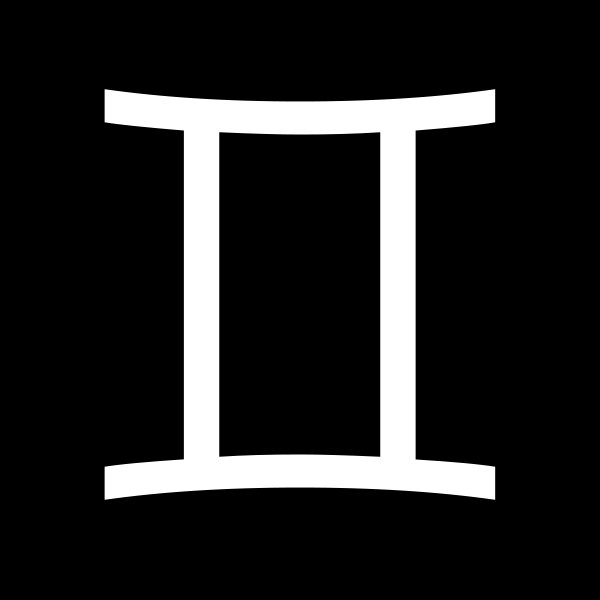
<style>
.page{position:relative;width:600px;height:600px;background:#000000}
.page>*{position:absolute;margin:0}
.t1{font:588px "ArialUnicodeMS";color:#ffffff}
</style>
<div class="page">
<p class="t1" style="left:104px;top:89px;width:392px;height:411px">♊︎</p>
</div>
